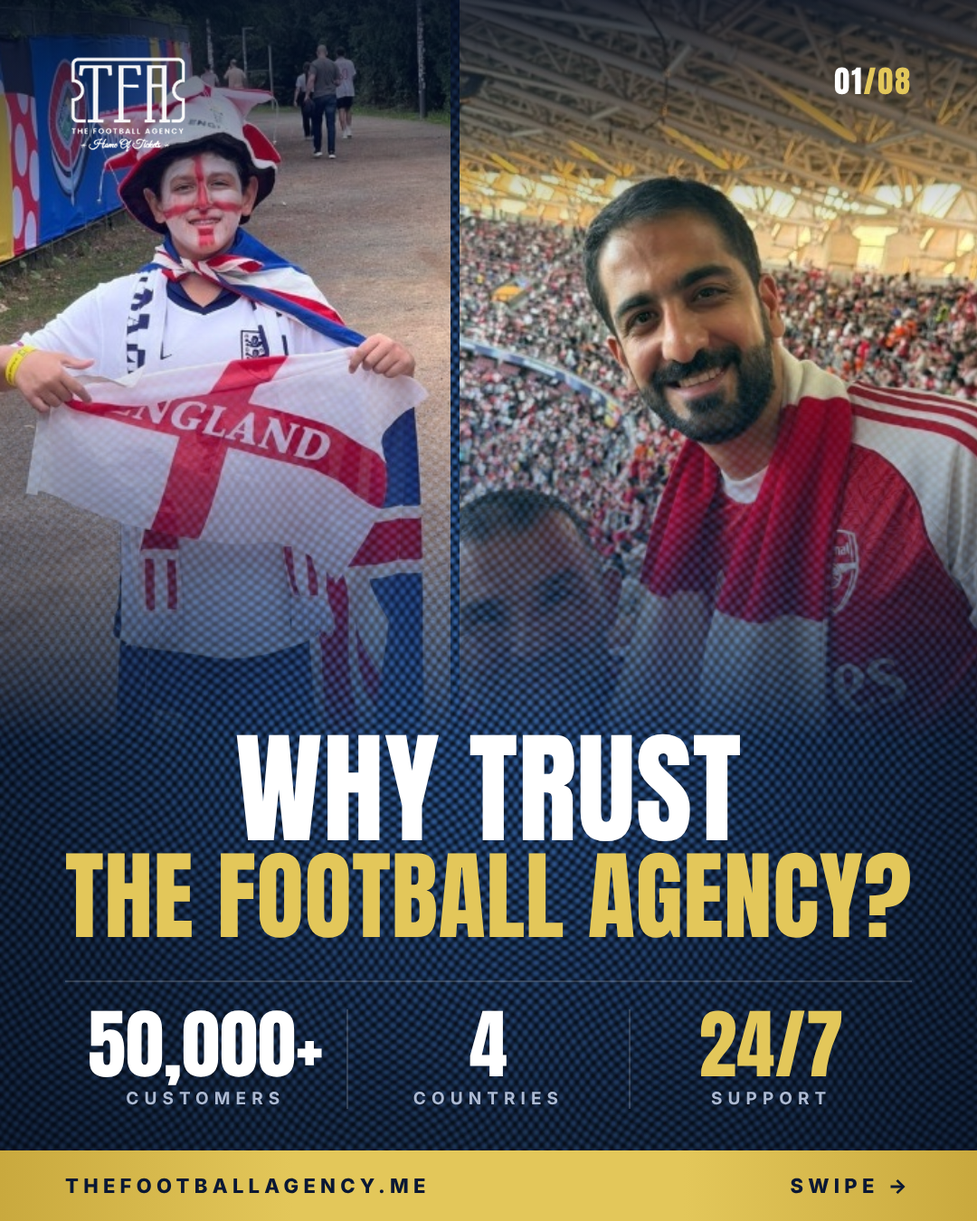
<style>
.page{position:relative;width:977px;height:1221px}
.page>*{position:absolute;margin:0}
.t1{font:30.7px "Anton-Regular";letter-spacing:0.06em;color:#e3c75a}
.t2{font:30.7px "Anton-Regular";letter-spacing:0.06em;color:#ffffff}
.t3{font:122.3px "Anton-Regular";letter-spacing:0.005em;color:#ffffff}
.t4{font:97.4px "Anton-Regular";letter-spacing:0.005em;color:#e3c75a}
.t5{font:76px "Anton-Regular";letter-spacing:0.005em;color:#ffffff}
.t6{font:76px "Anton-Regular";letter-spacing:0.005em;color:#e3c75a}
.t7{font:17.2px "Inter-Bold";letter-spacing:0.32em;color:#aebbd3}
.t8{font:19.9px "Inter-ExtraBold";letter-spacing:0.24em;color:#0a1834}
</style>
<div class="page">
<p class="t1" style="left:834px;top:67px;width:76px;height:28px"><span class="t2">01</span>/08</p>
<p class="t3" style="left:236px;top:733px;width:504px;height:108px">WHY TRUST</p>
<p class="t4" style="left:66px;top:852px;width:844px;height:86px">THE FOOTBALL AGENCY?</p>
<p class="t5" style="left:90px;top:1010px;width:232px;height:75px">50,000+</p>
<p class="t5" style="left:469px;top:1010px;width:37px;height:66px">4</p>
<p class="t6" style="left:700px;top:1010px;width:142px;height:66px">24/7</p>
<p class="t7" style="left:127px;top:1092px;width:152px;height:13px">CUSTOMERS</p>
<p class="t7" style="left:413px;top:1092px;width:145px;height:13px">COUNTRIES</p>
<p class="t7" style="left:711px;top:1092px;width:115px;height:13px">SUPPORT</p>
<p class="t8" style="left:65px;top:1177px;width:360px;height:17px">THEFOOTBALLAGENCY.ME</p>
<p class="t8" style="left:790px;top:1177px;width:115px;height:17px">SWIPE →</p>
</div>
